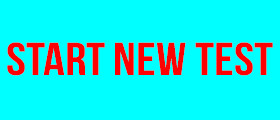
<style>
.page{position:relative;width:280px;height:120px;background:#00ffff}
.page>*{position:absolute;margin:0}
.t1{font:46px "BebasNeue";color:#ff0000;scale:1.17 1}
</style>
<div class="page">
<p class="t1" style="left:7px;top:42px;width:266px;height:34px">Start New Test</p>
</div>
